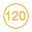
<style>
.page{position:relative;width:32px;height:32px;background:#ffffff}
.page>*{position:absolute;margin:0}
.t1{font:12px "HelveticaNeue";color:#edc051;font-weight:bold}
</style>
<div class="page">
<p class="t1" style="left:5px;top:11px;width:21px;height:10px">120</p>
</div>
